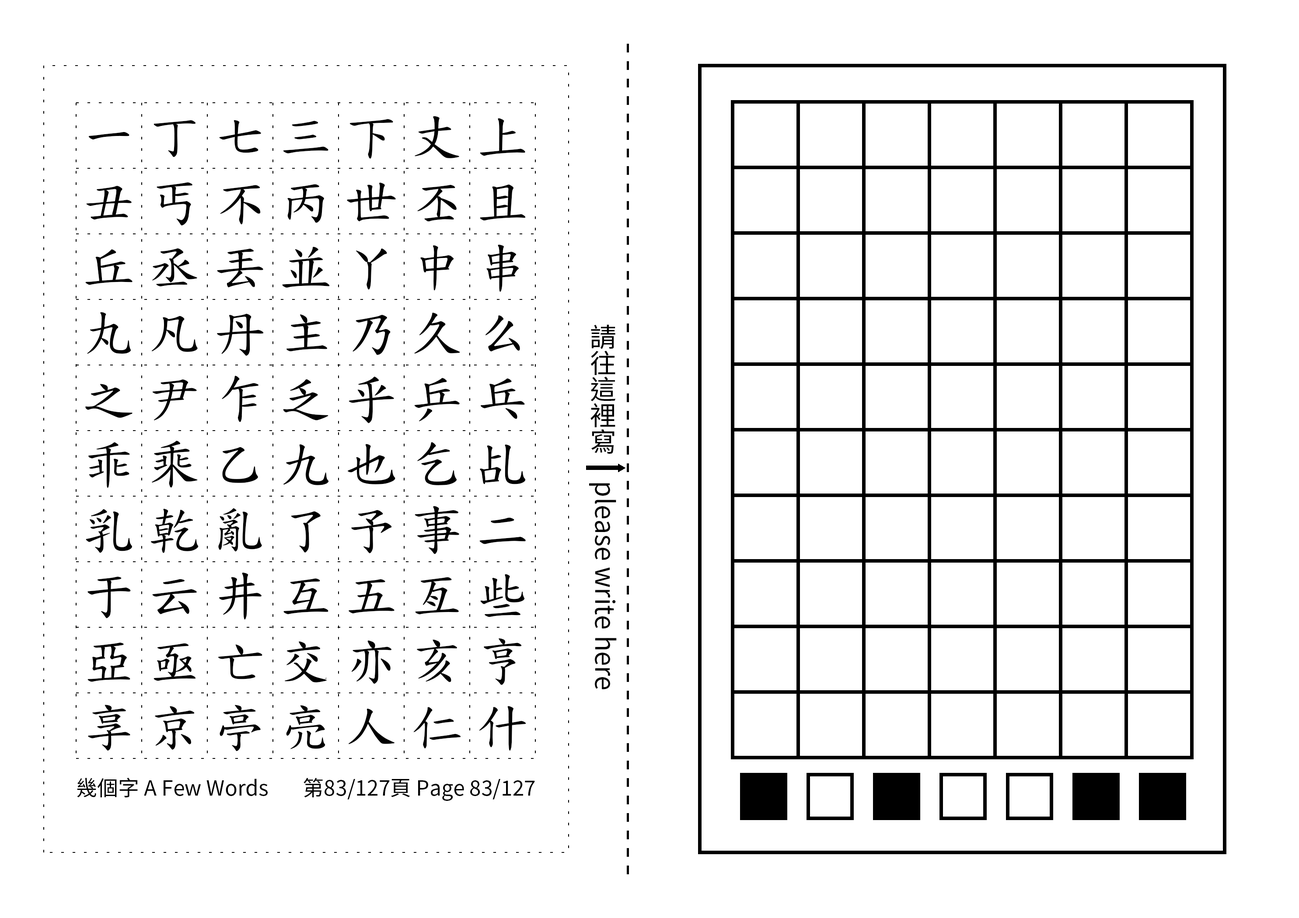
<style>
.page{position:relative;width:1299px;height:918px;background:#ffffff}
.page>*{position:absolute;margin:0}
.t1{font:52.5px/65.6px "TW-Kai-98_1";letter-spacing:0.25em;color:#000000}
.t2{font:26.2px "SourceHanSansTC-Regular";color:#000000}
.t3{font:21px "SourceHanSansTC-Regular";color:#000000}
</style>
<div class="page">
<p class="t1" style="left:85px;top:116px;width:441px;height:636px;text-align:center">一丁七三下丈上丑丐不丙世丕且丘丞丟並丫中串丸凡丹主乃久么之尹乍乏乎乒乓乖乘乙九也乞乩乳乾亂了予事二于云井互五亙些亞亟亡交亦亥亨享京亭亮人仁什</p>
<p class="t2" style="left:589px;top:324px;width:28px;height:366px;text-align:center">請往這裡寫　please write here</p>
<p class="t3" style="left:77px;top:778px;width:191px;height:20px">幾個字 A Few Words</p>
<p class="t3" style="left:303px;top:778px;width:232px;height:23px">第83/127頁 Page 83/127</p>
</div>
